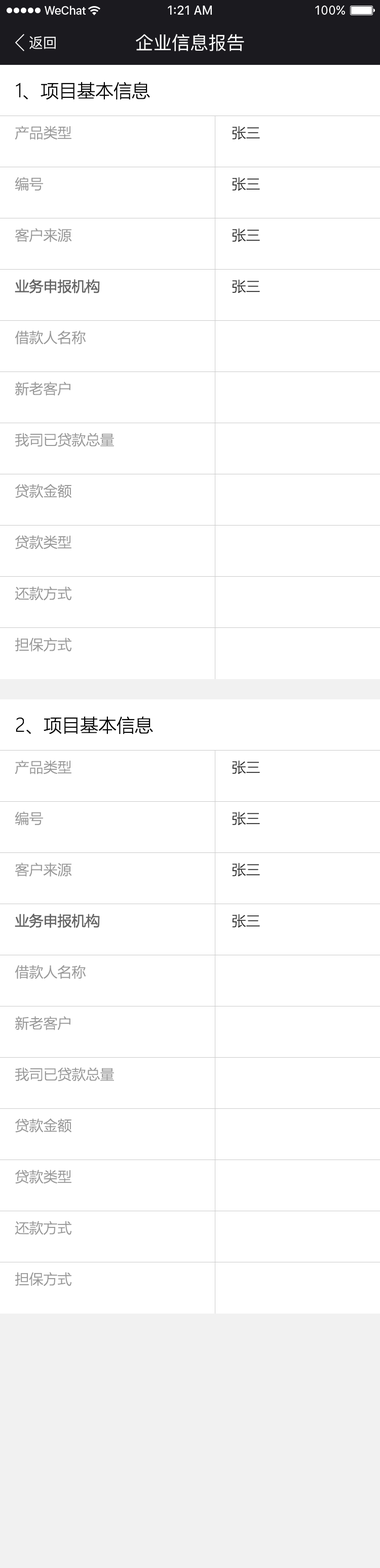
<style>
.page{position:relative;width:380px;height:1568px;background:#ffffff}
.page>*{position:absolute;margin:0}
.t1{font:14.2px "PingFang-SC-Medium";color:#ffffff}
.t2{font:18.2px "PingFang-SC-Medium";color:#ffffff}
.t3{font:18.2px "MicrosoftYaHeiLight";color:#000000}
.t4{font:14.2px/53.2px "MicrosoftYaHeiLight";color:#999999}
.t5{font:14.2px/53.2px "MicrosoftYaHei";color:#666666}
.t6{font:14.2px/53.2px "MicrosoftYaHeiLight";color:#333333}
</style>
<div class="page">
<p class="t1" style="left:29px;top:36px;width:27px;height:13px">返回</p>
<p class="t2" style="left:136px;top:34px;width:108px;height:17px">企业信息报告</p>
<p class="t3" style="left:16px;top:82px;width:134px;height:18px">1、项目基本信息</p>
<p class="t4" style="left:15px;top:126px;width:99px;height:526px">产品类型<br>编号<br>客户来源<br><span class="t5">业务申报机构<br></span>借款人名称<br>新老客户<br>我司已贷款总量<br>贷款金额<br>贷款类型<br>还款方式<br>担保方式</p>
<p class="t6" style="left:232px;top:126px;width:28px;height:167px;text-align:center">张三<br>张三<br>张三<br>张三</p>
<p class="t3" style="left:16px;top:716px;width:137px;height:18px">2、项目基本信息</p>
<p class="t4" style="left:15px;top:760px;width:99px;height:526px">产品类型<br>编号<br>客户来源<br><span class="t5">业务申报机构<br></span>借款人名称<br>新老客户<br>我司已贷款总量<br>贷款金额<br>贷款类型<br>还款方式<br>担保方式</p>
<p class="t6" style="left:232px;top:760px;width:28px;height:168px;text-align:center">张三<br>张三<br>张三<br>张三</p>
</div>
